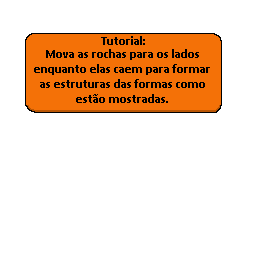
<style>
.page{position:relative;width:256px;height:256px;background:#ffffff}
.page>*{position:absolute;margin:0}
.t1{font:12.5px "Calibri-Bold";color:#000000}
</style>
<div class="page">
<p class="t1" style="left:101px;top:36px;width:44px;height:9px">Tutorial:</p>
<p class="t1" style="left:34px;top:49px;width:176px;height:54px;text-align:center">Mova as rochas para os lados enquanto elas caem para formar as estruturas das formas como estão mostradas.</p>
</div>
